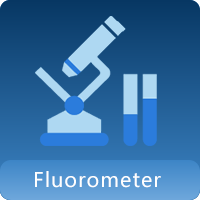
<style>
.page{position:relative;width:200px;height:200px}
.page>*{position:absolute;margin:0}
.t1{font:20px "MicrosoftYaHei";letter-spacing:0.05em;color:#ffffff}
</style>
<div class="page">
<p class="t1" style="left:35px;top:171px;width:126px;height:17px">Fluorometer</p>
</div>
